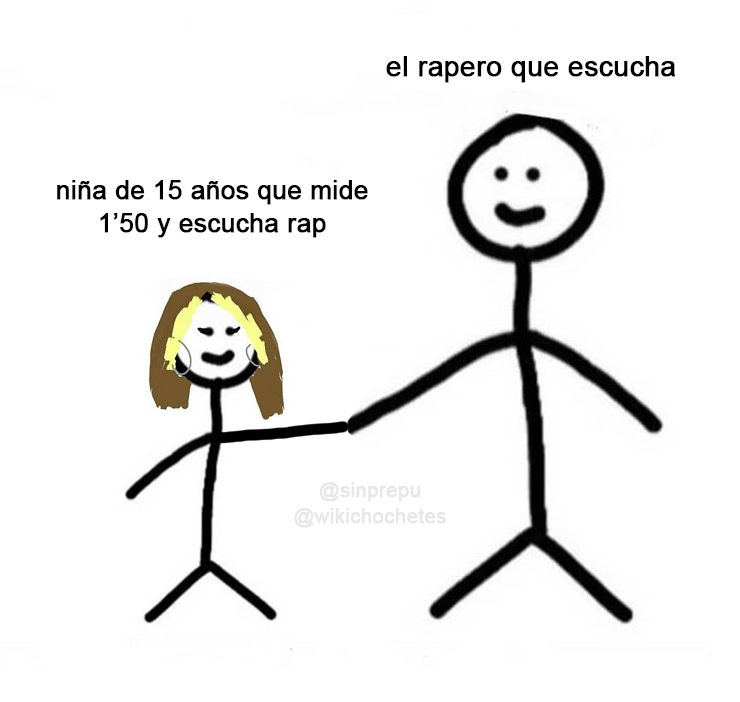
<style>
.page{position:relative;width:740px;height:702px;background:#ffffff}
.page>*{position:absolute;margin:0}
.t1{font:27.8px "ArialMT";color:#000000;font-weight:bold}
.t2{font:25.7px "ArialMT";color:#000000;font-weight:bold}
.t3{font:20.1px "ArialMT";color:#e7e7e7;font-weight:bold}
</style>
<div class="page">
<p class="t1" style="left:386px;top:56px;width:290px;height:27px">el rapero que escucha</p>
<p class="t2" style="left:57px;top:180px;width:311px;height:58px;text-align:center">niña de 15 años que mide<br>1’50 y escucha rap</p>
<p class="t3" style="left:294px;top:482px;width:152px;height:46px;text-align:center">@sinprepu<br>@wikichochetes</p>
</div>
